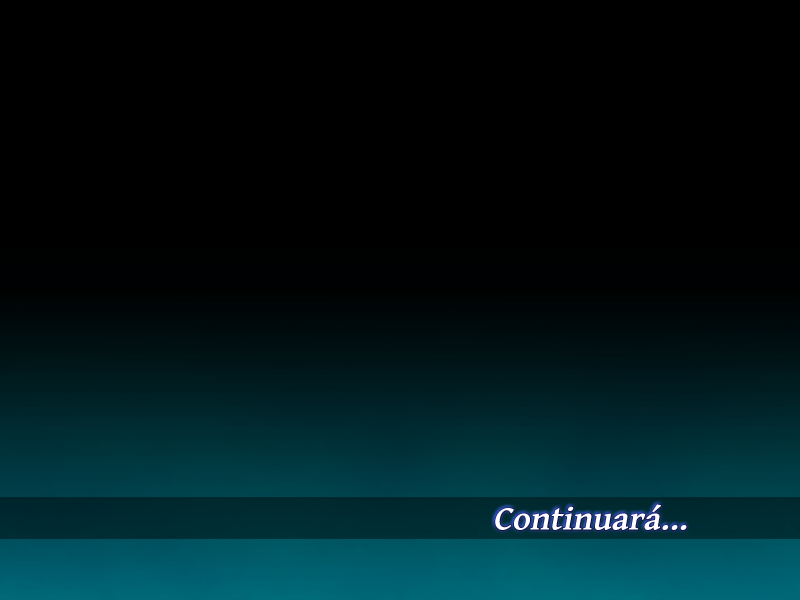
<style>
.page{position:relative;width:800px;height:600px;background:#000000}
.page>*{position:absolute;margin:0}
.t1{font:34px "GentiumBasic-Bold";color:#ffffff;font-style:italic}
</style>
<div class="page">
<p class="t1" style="left:495px;top:504px;width:192px;height:26px">Continuará...</p>
</div>
